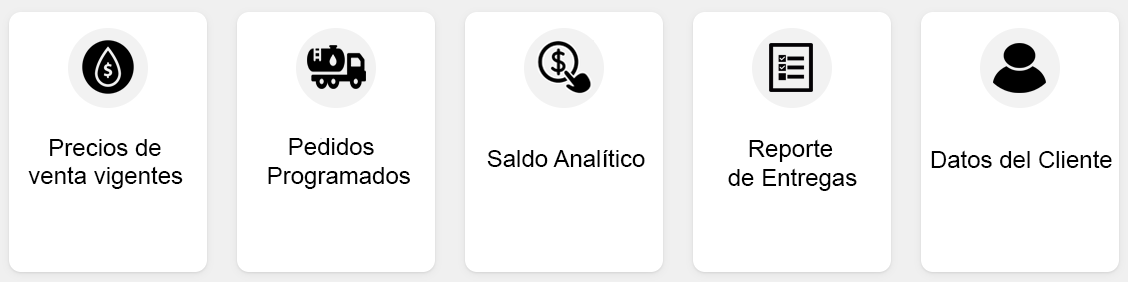
<style>
.page{position:relative;width:1128px;height:282px;background:#ffffff}
.page>*{position:absolute;margin:0}
.t1{font:24px "ArialMT";color:#000000}
.t2{font:24px "Impact";color:#000000}
</style>
<div class="page">
<p class="t1" style="left:28px;top:139px;width:155px;height:50px">Precios de <br>venta vigentes</p>
<p class="t1" style="left:268px;top:138px;width:142px;height:51px"><span class="t2">     </span>Pedidos <br>Programados</p>
<p class="t1" style="left:487px;top:149px;width:158px;height:18px">Saldo Analítico</p>
<p class="t1" style="left:728px;top:139px;width:129px;height:52px">Reporte <br>de Entregas</p>
<p class="t1" style="left:931px;top:150px;width:181px;height:18px">Datos del Cliente</p>
</div>
